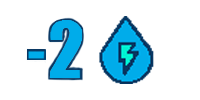
<style>
.page{position:relative;width:200px;height:100px;background:#ffffff}
.page>*{position:absolute;margin:0}
.t1{font:72px "Impact";color:#00acea}
</style>
<div class="page">
<p class="t1" style="left:27px;top:20px;width:56px;height:58px">-2</p>
</div>
